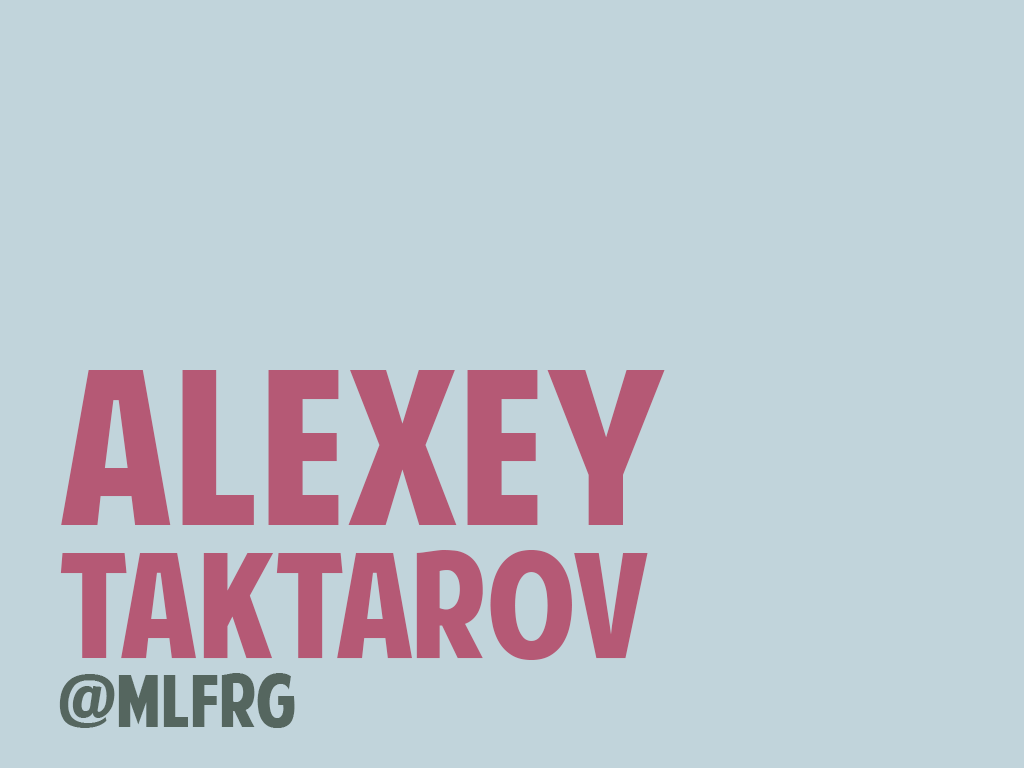
<style>
.page{position:relative;width:1024px;height:768px;background:#c1d4db}
.page>*{position:absolute;margin:0}
.t1{font:213.1px "AmericanPurpose";color:#b55975}
.t2{font:145.4px "AmericanPurpose";color:#b55975}
.t3{font:72px "AmericanPurpose";color:#55665f}
</style>
<div class="page">
<p class="t1" style="left:61px;top:370px;width:604px;height:155px">Alexey</p>
<p class="t2" style="left:60px;top:550px;width:588px;height:110px">Taktarov</p>
<p class="t3" style="left:59px;top:673px;width:236px;height:55px">@mlfrg</p>
</div>
